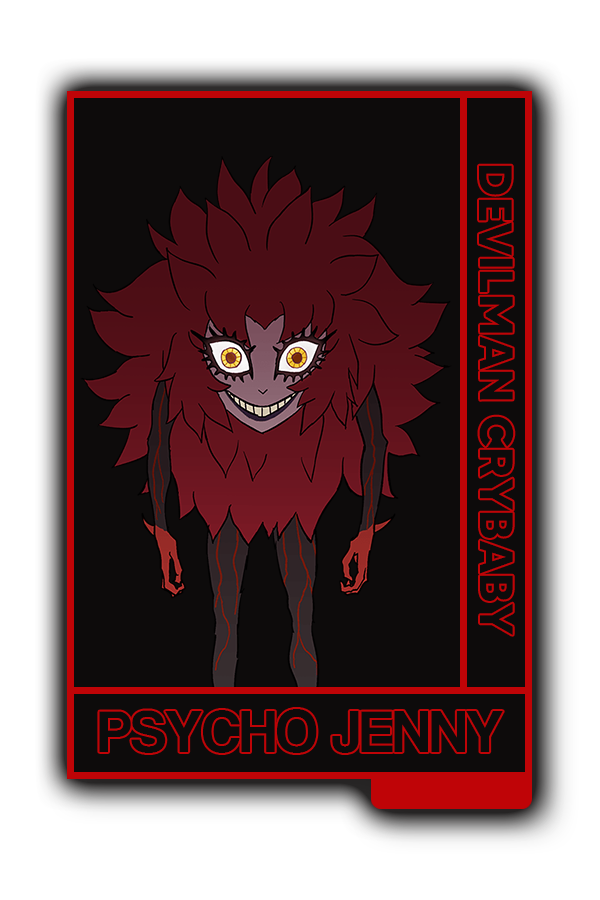
<style>
.page{position:relative;width:600px;height:900px;background:#0d0b0b}
.page>*{position:absolute;margin:0}
.t1{font:46.8px "MADETOMMY-Bold";color:#0d0b0b}
.t2{font:61.7px "CoolveticaRg-Regular";color:#0d0b0b}
</style>
<div class="page">
<p class="t1" style="left:479px;top:165px;width:35px;height:470px;rotate:90deg">DEVILMAN CRYBABY</p>
<p class="t2" style="left:99px;top:709px;width:404px;height:44px">PSYCHO JENNY</p>
</div>
